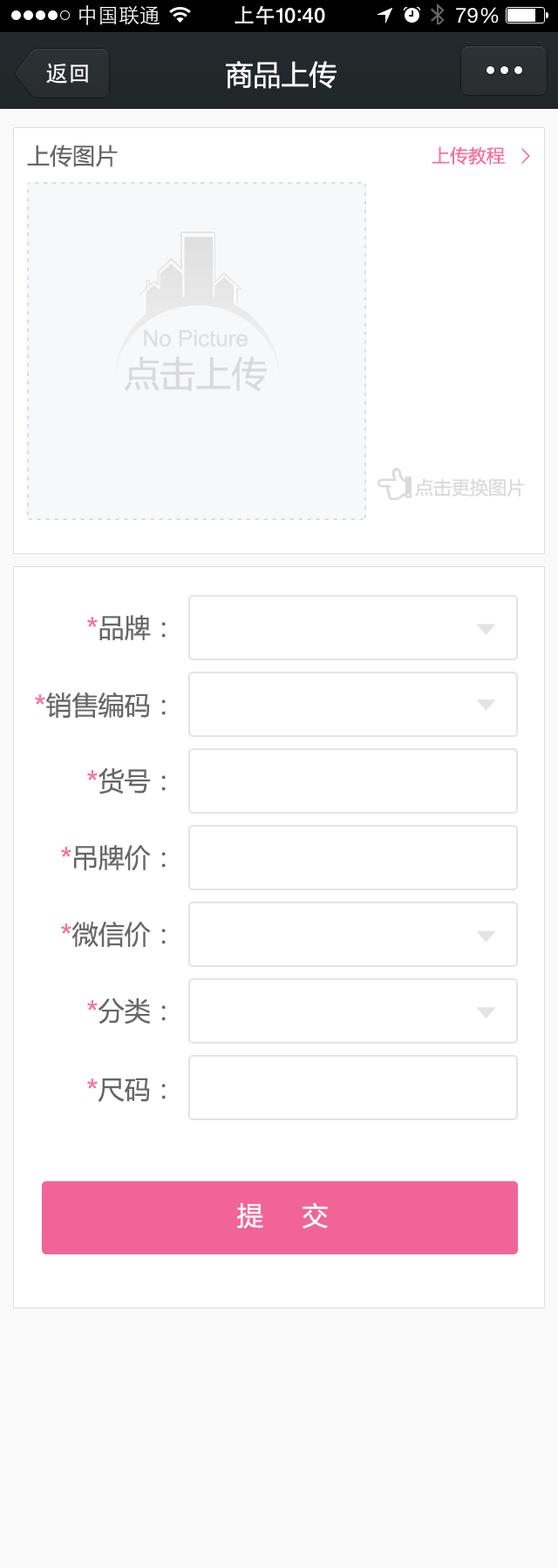
<style>
.page{position:relative;width:558px;height:1568px;background:#ffffff}
.page>*{position:absolute;margin:0}
.t1{font:27.9px "MicrosoftYaHei";color:#ffffff}
.t2{font:22.6px "MicrosoftYaHei";color:#676767}
.t3{font:18.3px "MicrosoftYaHei";color:#f86b9f}
.t4{font:22.6px "ArialMT";color:#dfdfdf}
.t5{font:35.7px "MicrosoftYaHei";color:#dadada}
.t6{font:18.3px "MicrosoftYaHei";color:#dadada}
.t7{font:26.1px "MicrosoftYaHei";color:#676767}
.t8{font:26.1px "MicrosoftYaHei";color:#f86b9f}
.t9{font:26.1px "MicrosoftYaHei";color:#ffffff}
</style>
<div class="page">
<p class="t1" style="left:226px;top:61px;width:110px;height:28px">商品上传</p>
<p class="t2" style="left:27px;top:145px;width:91px;height:22px">上传图片</p>
<p class="t3" style="left:431px;top:146px;width:73px;height:19px">上传教程</p>
<p class="t4" style="left:144px;top:329px;width:103px;height:18px">No Picture</p>
<p class="t5" style="left:124px;top:356px;width:143px;height:36px">点击上传</p>
<p class="t6" style="left:415px;top:478px;width:109px;height:19px">点击更换图片</p>
<p class="t7" style="left:87px;top:614px;width:79px;height:27px"><span class="t8">*</span>品牌：</p>
<p class="t7" style="left:35px;top:692px;width:131px;height:26px"><span class="t8">*</span>销售编码：</p>
<p class="t7" style="left:87px;top:767px;width:79px;height:27px"><span class="t8">*</span>货号：</p>
<p class="t7" style="left:61px;top:844px;width:105px;height:27px"><span class="t8">*</span>吊牌价：</p>
<p class="t7" style="left:61px;top:922px;width:105px;height:26px"><span class="t8">*</span>微信价：</p>
<p class="t7" style="left:87px;top:997px;width:79px;height:27px"><span class="t8">*</span>分类：</p>
<p class="t7" style="left:87px;top:1078px;width:79px;height:24px"><span class="t8">*</span>尺码：</p>
<p class="t9" style="left:237px;top:1202px;width:91px;height:26px">提     交</p>
</div>
